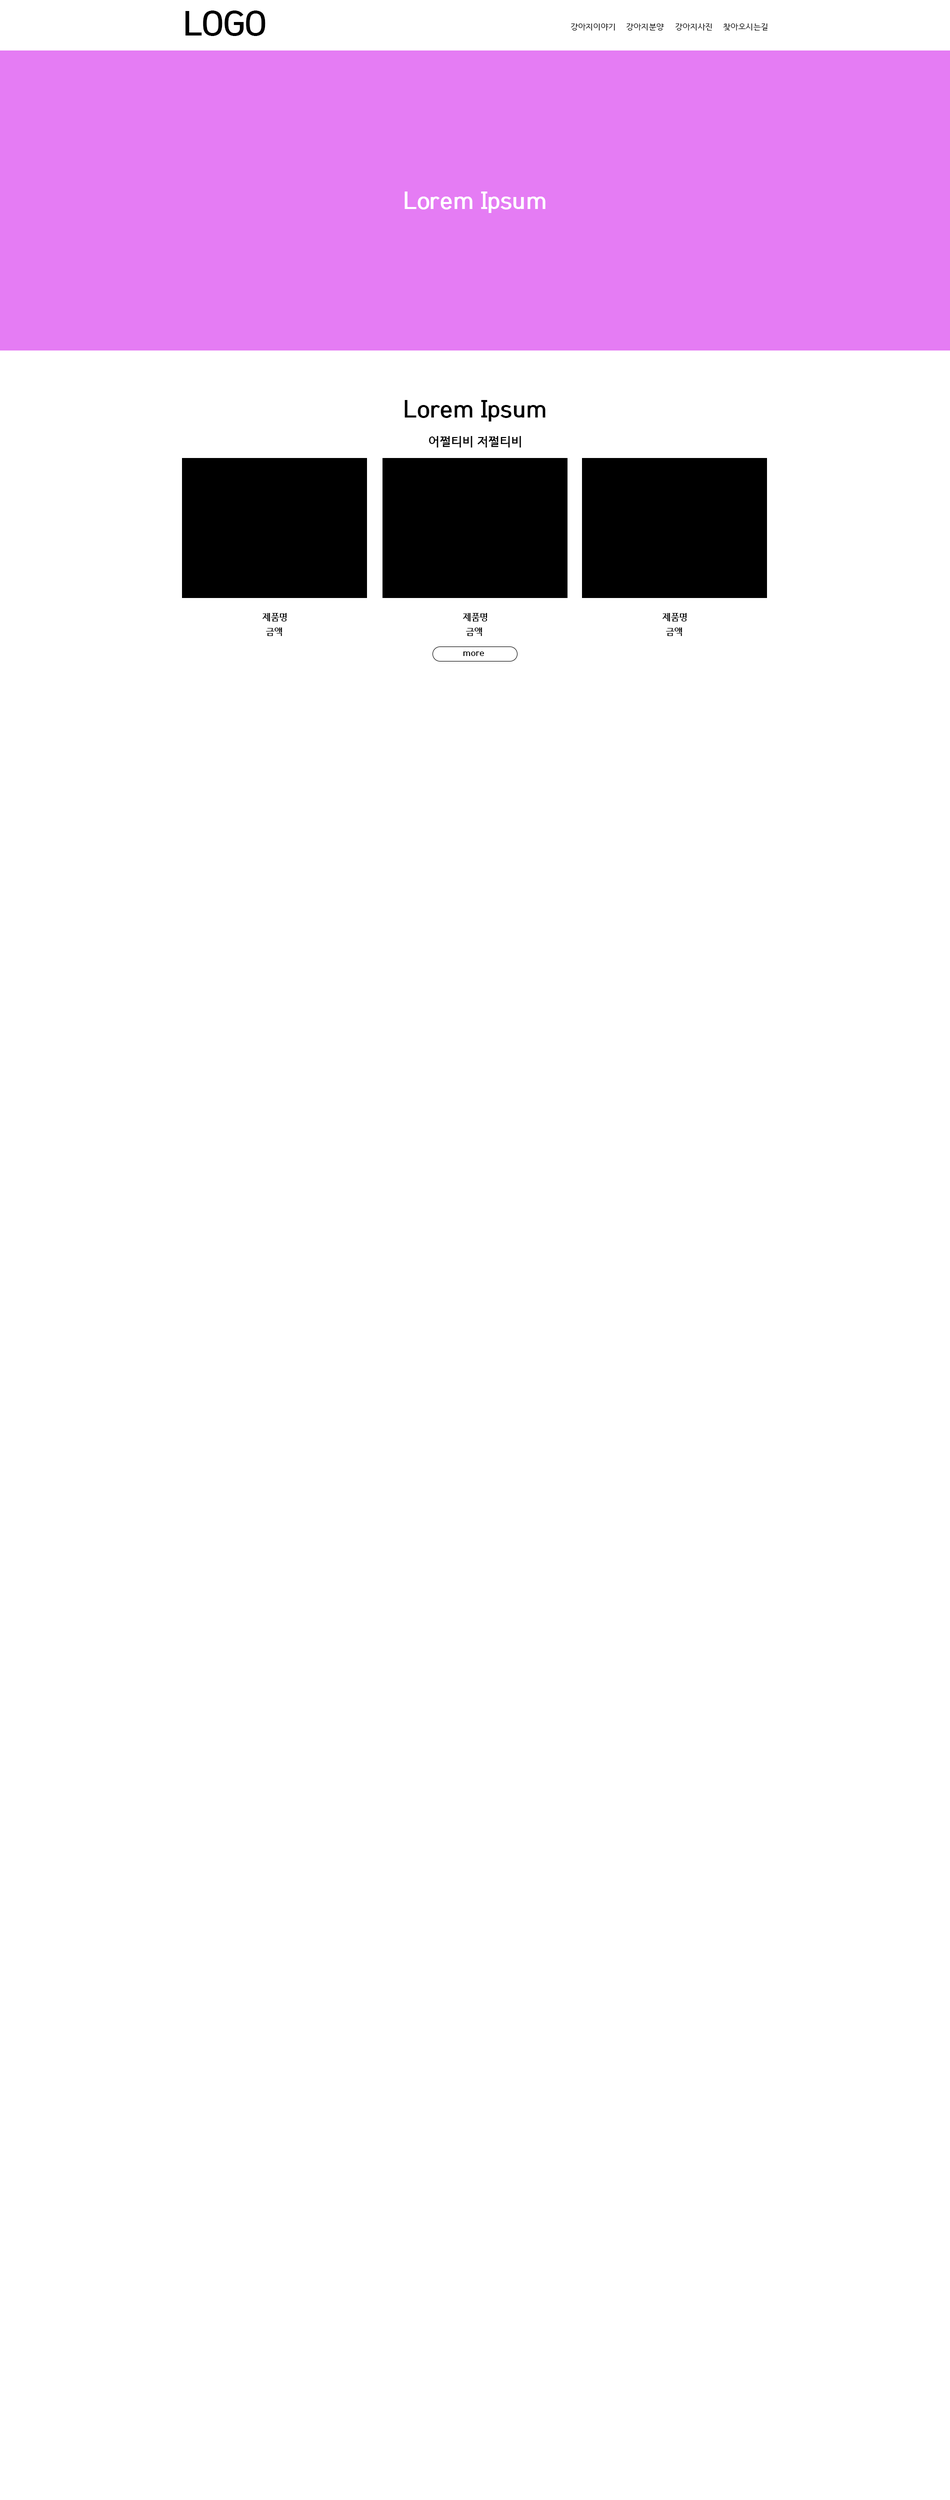
<style>
.page{position:relative;width:950px;height:2500px;background:#ffffff}
.page>*{position:absolute;margin:0}
.t1{font:33.5px "HCRDotum-Bold";letter-spacing:-0.025em;color:#000000}
.t2{font:8px "HCRDotum";letter-spacing:-0.025em;color:#000000}
.t3{font:24px "HCRDotum-Bold";letter-spacing:-0.025em;color:#ffffff}
.t4{font:24px "HCRDotum-Bold";letter-spacing:-0.025em;color:#000000}
.t5{font:12px "HCRDotum-Bold";letter-spacing:-0.025em;color:#000000}
.t6{font:9px "HCRDotum-Bold";letter-spacing:-0.025em;color:#000000}
</style>
<div class="page">
<p class="t1" style="left:186px;top:10px;width:80px;height:26px">LOGO</p>
<p class="t2" style="left:570px;top:24px;width:45px;height:6px">강아지이야기</p>
<p class="t2" style="left:626px;top:24px;width:38px;height:6px">강아지분양</p>
<p class="t2" style="left:675px;top:24px;width:37px;height:6px">강아지사진</p>
<p class="t2" style="left:723px;top:24px;width:45px;height:6px">찾아오시는길</p>
<p class="t3" style="left:404px;top:192px;width:142px;height:21px">Lorem Ipsum</p>
<p class="t4" style="left:404px;top:400px;width:142px;height:22px">Lorem Ipsum</p>
<p class="t5" style="left:429px;top:436px;width:92px;height:12px">어쩔티비 저쩔티비</p>
<p class="t6" style="left:262px;top:613px;width:25px;height:9px">제품명</p>
<p class="t6" style="left:462px;top:613px;width:26px;height:9px">제품명</p>
<p class="t6" style="left:662px;top:613px;width:25px;height:9px">제품명</p>
<p class="t6" style="left:266px;top:628px;width:16px;height:8px">금액</p>
<p class="t6" style="left:466px;top:628px;width:16px;height:8px">금액</p>
<p class="t6" style="left:666px;top:628px;width:16px;height:8px">금액</p>
<p class="t6" style="left:463px;top:652px;width:21px;height:4px">more</p>
</div>
